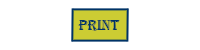
<style>
.page{position:relative;width:200px;height:50px;background:#ffffff}
.page>*{position:absolute;margin:0}
.t1{font:15px "Algerian";color:#003366}
</style>
<div class="page">
<p class="t1" style="left:78px;top:20px;width:42px;height:11px">Print</p>
</div>
